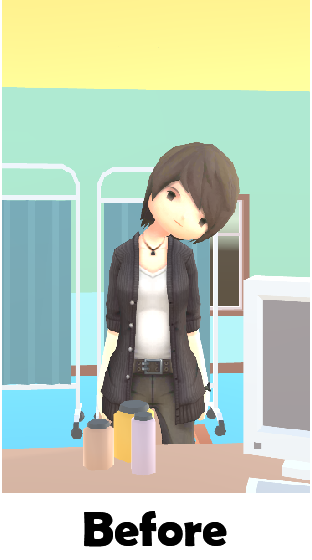
<style>
.page{position:relative;width:312px;height:560px}
.page>*{position:absolute;margin:0}
.t1{font:50px "BerlinSansFBDemi-Bold";color:#000000}
</style>
<div class="page">
<p class="t1" style="left:84px;top:511px;width:143px;height:36px">Before</p>
</div>
